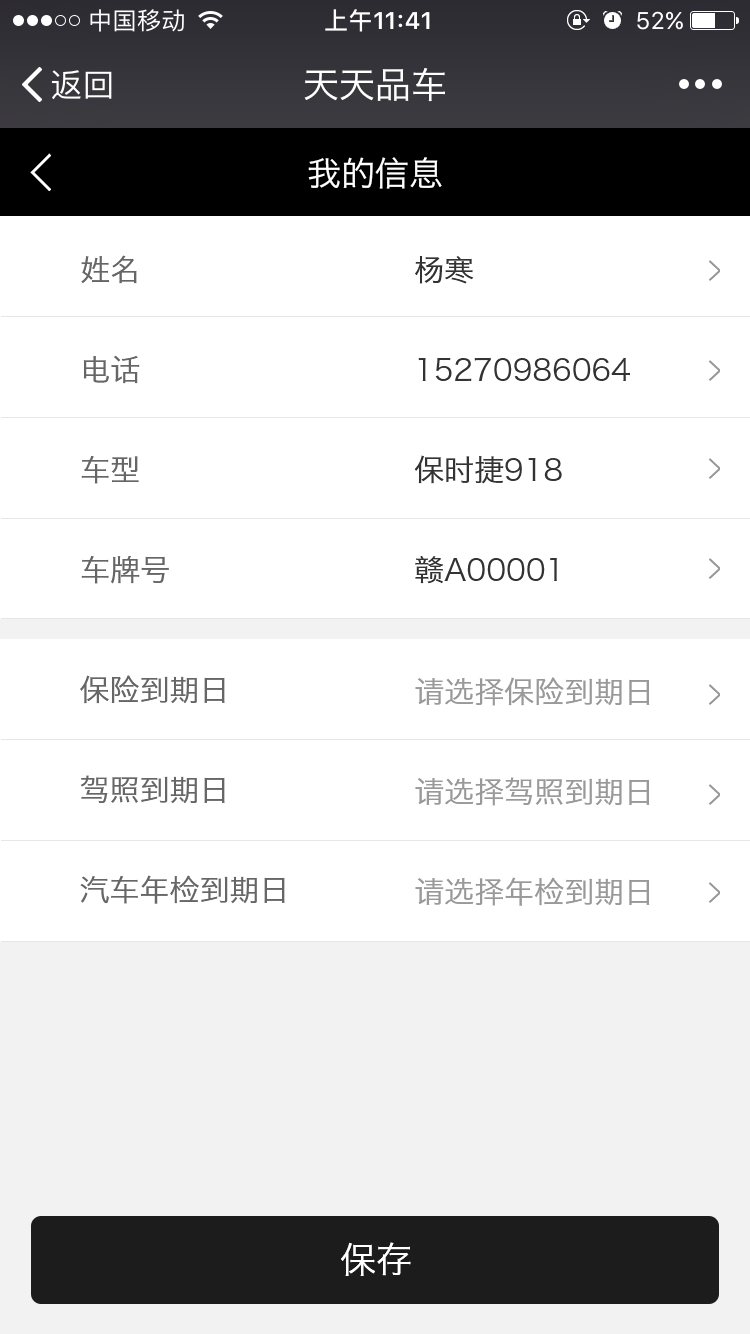
<style>
.page{position:relative;width:750px;height:1334px;background:#ffffff}
.page>*{position:absolute;margin:0}
.t1{font:36px "HiraginoSansGB-W3";color:#ffffff}
.t2{font:34px "HiraginoSansGB-W3";color:#ffffff}
.t3{font:30px/100px "HiraginoSansGB-W3";color:#666666}
.t4{font:30px/100px "HiraginoSansGB-W3";color:#333333}
.t5{font:30px/100px "HiraginoSansGB-W3";color:#999999}
.t6{font:36px "HiraginoSansGB-W3";color:#ffffff;text-transform:uppercase}
</style>
<div class="page">
<p class="t1" style="left:304px;top:68px;width:141px;height:34px">天天品车</p>
<p class="t2" style="left:308px;top:157px;width:134px;height:32px">我的信息</p>
<p class="t3" style="left:81px;top:255px;width:88px;height:329px">姓名<br>电话<br>车型<br>车牌号</p>
<p class="t4" style="left:414px;top:256px;width:216px;height:328px">杨寒<br>15270986064<br>保时捷918<br>赣A00001</p>
<p class="t3" style="left:80px;top:675px;width:205px;height:229px">保险到期日<br>驾照到期日<br>汽车年检到期日</p>
<p class="t5" style="left:415px;top:677px;width:235px;height:229px">请选择保险到期日<br>请选择驾照到期日<br>请选择年检到期日</p>
<p class="t6" style="left:341px;top:1242px;width:70px;height:34px">保存</p>
</div>
